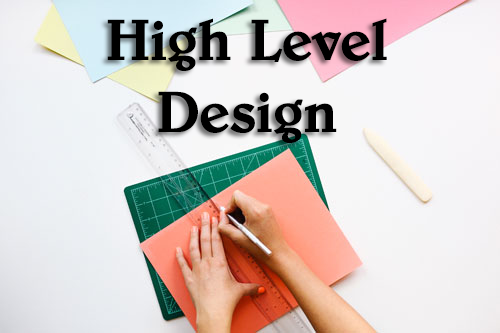
<style>
.page{position:relative;width:500px;height:333px}
.page>*{position:absolute;margin:0}
.t1{font:60px "Belwe-Bold";color:#000000}
</style>
<div class="page">
<p class="t1" style="left:107px;top:18px;width:280px;height:125px;text-align:center">High Level<br>Design</p>
</div>
